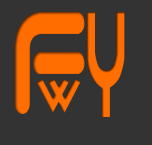
<style>
.page{position:relative;width:152px;height:145px;background:#333333}
.page>*{position:absolute;margin:0}
.t1{font:127.9px "QuantumRound(BRK)";letter-spacing:0.01em;color:#ff6d01;scale:0.69 1}
.t2{font:106.1px "roundabout";letter-spacing:0.01em;color:#ff6d01;scale:0.5 1}
.t3{font:41.4px "roundabout";letter-spacing:0.01em;color:#ff6d01}
</style>
<div class="page">
<p class="t1" style="left:14px;top:12px;width:71px;height:102px">f</p>
<p class="t2" style="left:86px;top:12px;width:39px;height:105px">y</p>
<p class="t3" style="left:36px;top:79px;width:45px;height:34px">w</p>
</div>
